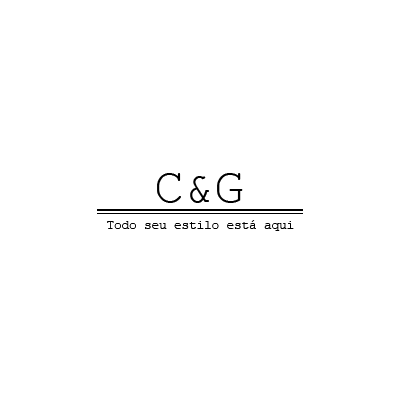
<style>
.page{position:relative;width:400px;height:400px;background:#ffffff}
.page>*{position:absolute;margin:0}
.t1{font:50px "CourierNewPSMT";color:#000000}
.t2{font:12.5px "CourierNewPSMT";color:#000000}
</style>
<div class="page">
<p class="t1" style="left:157px;top:173px;width:86px;height:30px">C&amp;G</p>
<p class="t2" style="left:107px;top:220px;width:187px;height:11px">Todo seu estilo está aqui</p>
</div>
